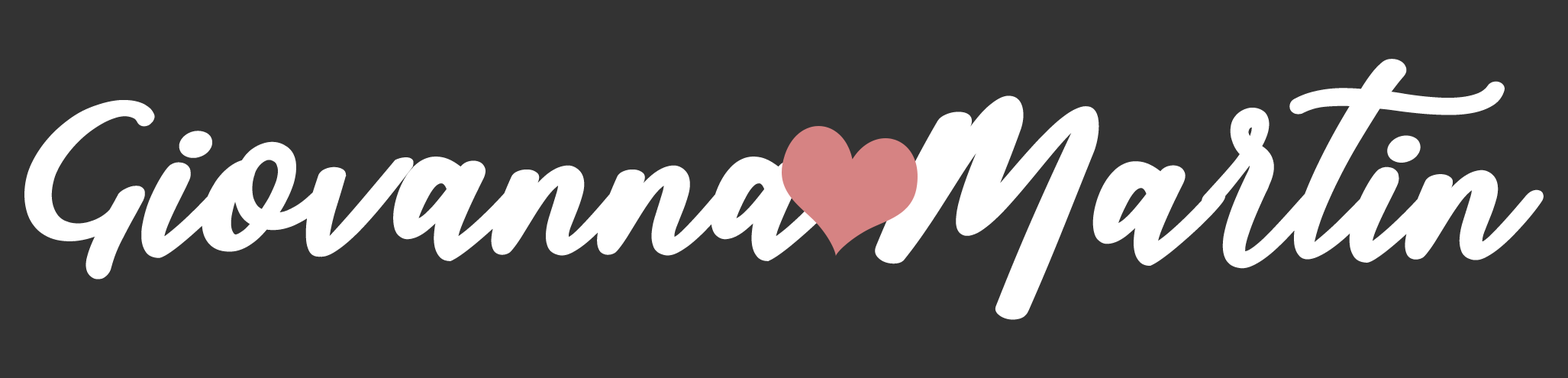
<style>
.page{position:relative;width:1568px;height:378px;background:#333333}
.page>*{position:absolute;margin:0}
.t1{font:221.7px "sophia-script";letter-spacing:-0.01em;color:#ffffff}
</style>
<div class="page">
<p class="t1" style="left:875px;top:59px;width:669px;height:261px">Martin</p>
<p class="t1" style="left:24px;top:100px;width:820px;height:179px">Giovanna</p>
</div>
